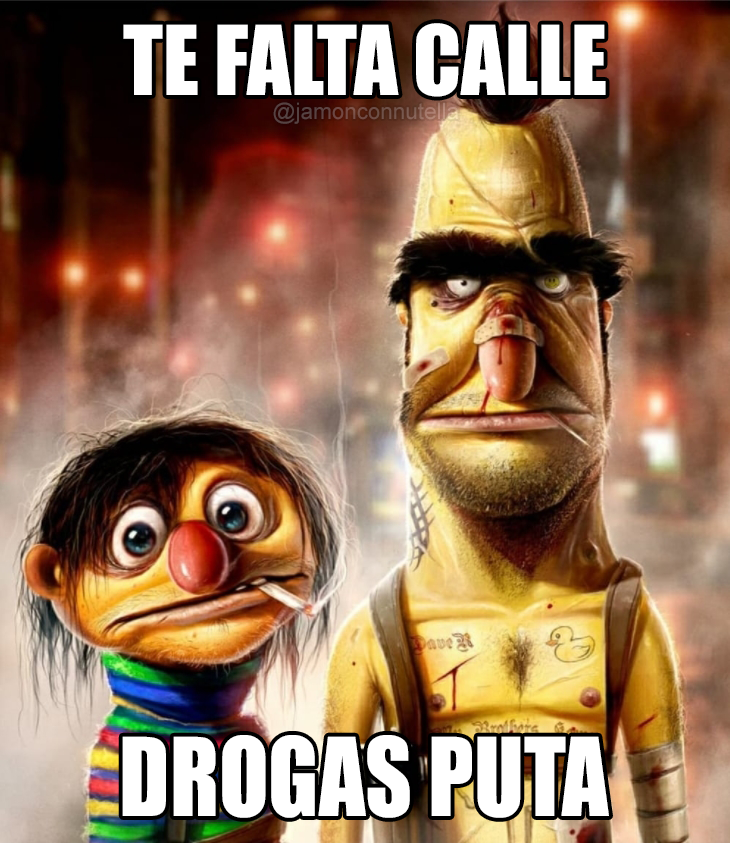
<style>
.page{position:relative;width:730px;height:843px}
.page>*{position:absolute;margin:0}
.t1{font:89px "Impact";color:#ffffff}
.t2{font:22.4px "ArialMT"}
.t3{font:100.3px "Impact";color:#ffffff;scale:0.91 1}
</style>
<div class="page">
<p class="t1" style="left:123px;top:23px;width:483px;height:74px">TE FALTA CALLE</p>
<p class="t2" style="left:273px;top:102px;width:185px;height:22px">@jamonconnutella</p>
<p class="t3" style="left:122px;top:735px;width:487px;height:83px">DROGAS PUTA</p>
</div>
